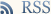
<style>
.page{position:relative;width:51px;height:14px;background:#fdfaf2}
.page>*{position:absolute;margin:0}
.t1{font:17.3px "Georgia";scale:0.94 1}
</style>
<div class="page">
<p class="t1" style="left:21px;top:0px;width:29px;height:14px">RSS</p>
</div>
